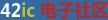
<style>
.page{position:relative;width:108px;height:20px;background:#356aa0}
.page>*{position:absolute;margin:0}
.t1{font:18px "MicrosoftYaHei-Bold";color:#b02b2c;scale:0.95 1}
.t2{font:18px "MicrosoftYaHei-Bold";color:#fafcfe;scale:0.95 1}
.t3{font:18px "MicrosoftYaHei-Bold";color:#c2c03a;scale:0.95 1}
</style>
<div class="page">
<p class="t1" style="left:0px;top:1px;width:108px;height:18px;rotate:-1deg"><span class="t2">42</span><span class="t3">ic </span>电子社区</p>
</div>
